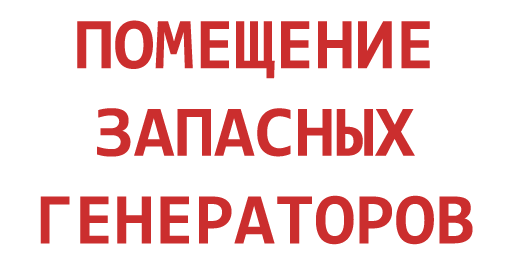
<style>
.page{position:relative;width:512px;height:256px;background:#ffffff}
.page>*{position:absolute;margin:0}
.t1{font:73px "Consolas-Bold";color:#cb2e2e}
</style>
<div class="page">
<p class="t1" style="left:40px;top:20px;width:433px;height:225px;text-align:center">ПОМЕЩЕНИЕ<br>ЗАПАСНЫХ<br>ГЕНЕРАТОРОВ</p>
</div>
